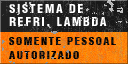
<style>
.page{position:relative;width:128px;height:64px}
.page>*{position:absolute;margin:0}
.t1{font:12px/13px "HelveticaLT-Condensed-Black";letter-spacing:0.14em;color:#ffffff}
.t2{font:11px/14px "HelveticaLT-Condensed-Black";letter-spacing:0.13em;color:#000000}
</style>
<div class="page">
<p class="t1" style="left:9px;top:4px;width:98px;height:22px">SISTEMA DE<br>REFRI. LAMBDA</p>
<p class="t2" style="left:9px;top:37px;width:107px;height:22px">SOMENTE PESSOAL<br>AUTORIZADO</p>
</div>
